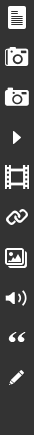
<style>
.page{position:relative;width:34px;height:435px;background:#333333}
.page>*{position:absolute;margin:0}
.t1{font:43px "BellMTBold";letter-spacing:-0.01em;color:#ffffff;scale:1.03 1}
</style>
<div class="page">
<p class="t1" style="left:8px;top:332px;width:18px;height:10px">“</p>
</div>
